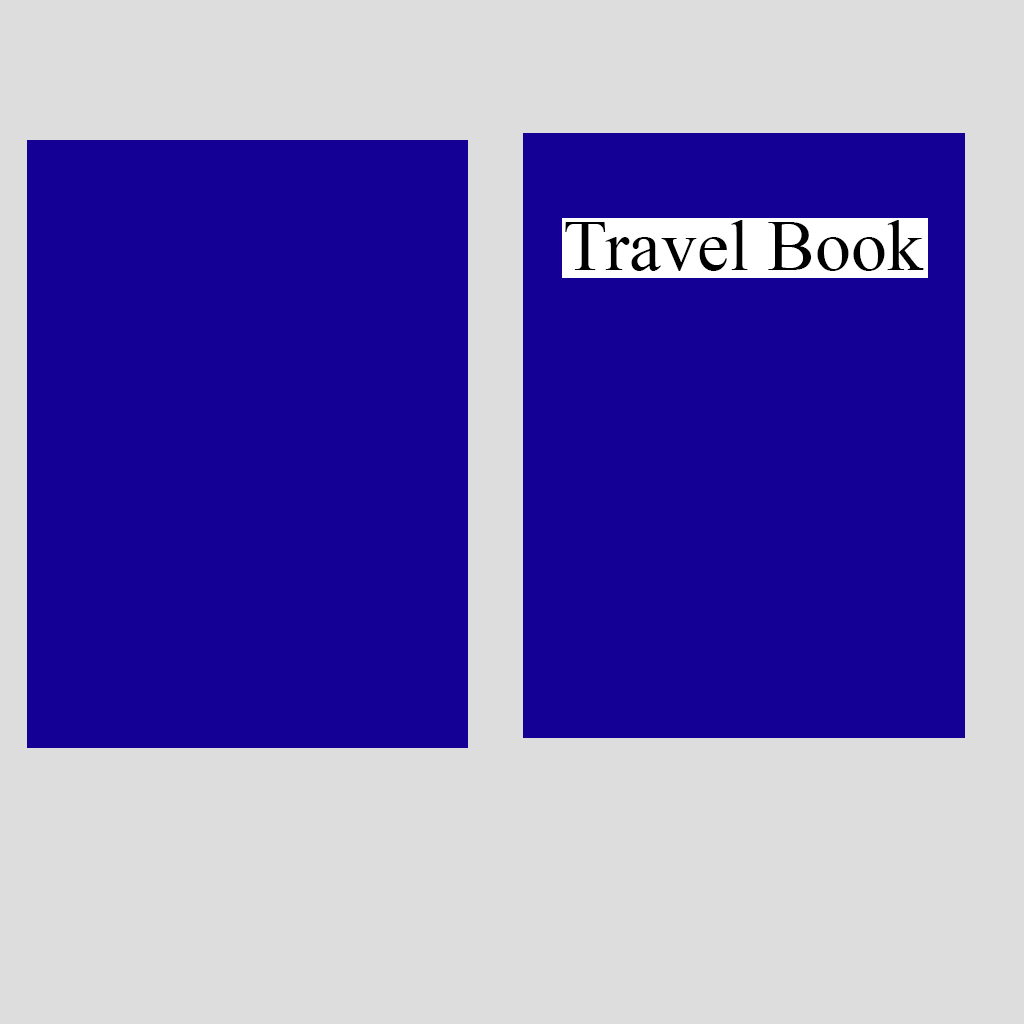
<style>
.page{position:relative;width:1024px;height:1024px;background:#dddddd}
.page>*{position:absolute;margin:0}
.t1{font:72px "TimesNewRomanPSMT";color:#000000}
</style>
<div class="page">
<p class="t1" style="left:565px;top:220px;width:359px;height:51px">Travel Book</p>
</div>
